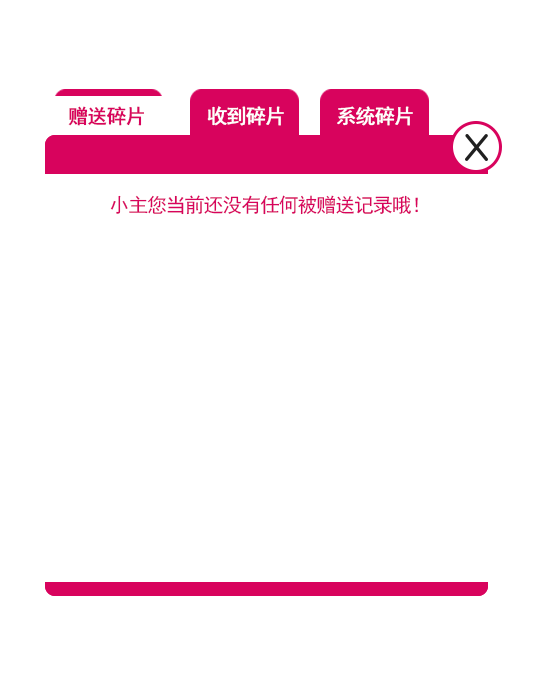
<style>
.page{position:relative;width:536px;height:695px;background:#ffffff}
.page>*{position:absolute;margin:0}
.t1{font:20px "SimHei";letter-spacing:-0.059em;color:#d8035d;font-weight:bold}
.t2{font:20px "SimHei";letter-spacing:-0.059em;color:#ffffff;font-weight:bold}
.t3{font:20px "SimHei";letter-spacing:-0.059em;color:#d8035d}
</style>
<div class="page">
<p class="t1" style="left:68px;top:106px;width:76px;height:20px">赠送碎片</p>
<p class="t2" style="left:207px;top:106px;width:77px;height:20px">收到碎片</p>
<p class="t2" style="left:337px;top:106px;width:76px;height:20px">系统碎片</p>
<p class="t3" style="left:110px;top:195px;width:308px;height:20px">小主您当前还没有任何被赠送记录哦！</p>
</div>
